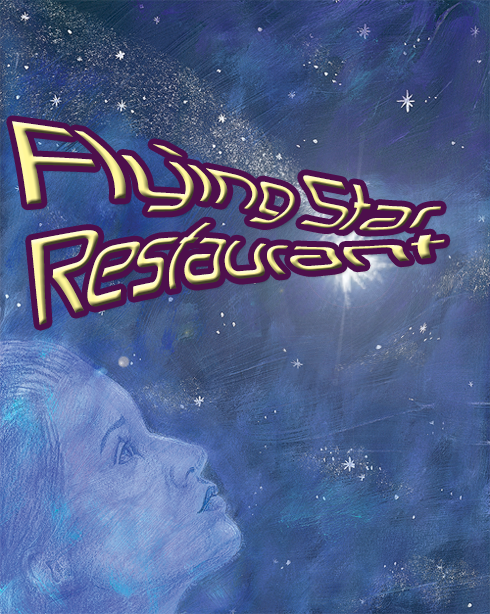
<style>
.page{position:relative;width:490px;height:614px}
.page>*{position:absolute;margin:0}
.t1{font:64.4px "Zekton";scale:1.27 1}
</style>
<div class="page">
<p class="t1" style="left:12px;top:121px;width:433px;height:204px">Flying Star<br>Restaurant</p>
</div>
